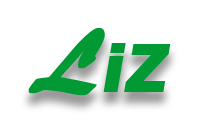
<style>
.page{position:relative;width:200px;height:119px;background:#ffffff}
.page>*{position:absolute;margin:0}
.t1{font:72px "FranklinGothic-HeavyItalic";letter-spacing:0.025em;color:#009933}
.t2{font:92px "BrushScriptStd";letter-spacing:0.025em;color:#009933;font-weight:bold}
</style>
<div class="page">
<p class="t1" style="left:28px;top:28px;width:143px;height:68px"><span class="t2">L</span>iZ</p>
</div>
